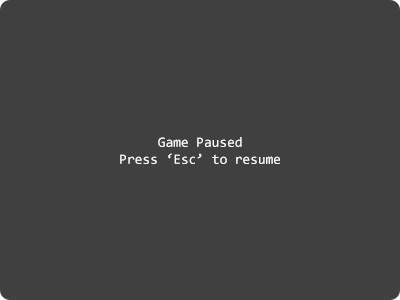
<style>
.page{position:relative;width:400px;height:300px;background:#404040}
.page>*{position:absolute;margin:0}
.t1{font:14px "Consolas";color:#ffffff}
</style>
<div class="page">
<p class="t1" style="left:120px;top:137px;width:160px;height:27px;text-align:center">Game Paused<br>Press ‘Esc’ to resume</p>
</div>
